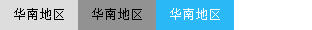
<style>
.page{position:relative;width:312px;height:30px;background:#ffffff}
.page>*{position:absolute;margin:0}
.t1{font:13px "SimSun";color:#000000}
.t2{font:13px "SimSun";color:#ffffff}
</style>
<div class="page">
<p class="t1" style="left:14px;top:8px;width:50px;height:12px">华南地区</p>
<p class="t1" style="left:92px;top:8px;width:50px;height:12px">华南地区</p>
<p class="t2" style="left:170px;top:8px;width:50px;height:12px">华南地区</p>
</div>
